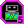
<style>
.page{position:relative;width:24px;height:24px}
.page>*{position:absolute;margin:0}
.t1{font:9px "Montserrat-Bold";color:#000000}
</style>
<div class="page">
<p class="t1" style="left:17px;top:16px;width:6px;height:7px">5</p>
</div>
